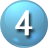
<style>
.page{position:relative;width:48px;height:48px;background:#ffffff}
.page>*{position:absolute;margin:0}
.t1{font:33px "NanumMyeongjoExtraBold";letter-spacing:0.025em;color:#ffffff;text-transform:uppercase;font-weight:bold}
</style>
<div class="page">
<p class="t1" style="left:15px;top:10px;width:18px;height:26px">4</p>
</div>
